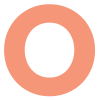
<style>
.page{position:relative;width:100px;height:100px;background:#ffffff}
.page>*{position:absolute;margin:0}
.t1{font:130.5px "Effra-Bold";letter-spacing:0.25em;color:#f69679}
</style>
<div class="page">
<p class="t1" style="left:4px;top:4px;width:92px;height:93px">O</p>
</div>
